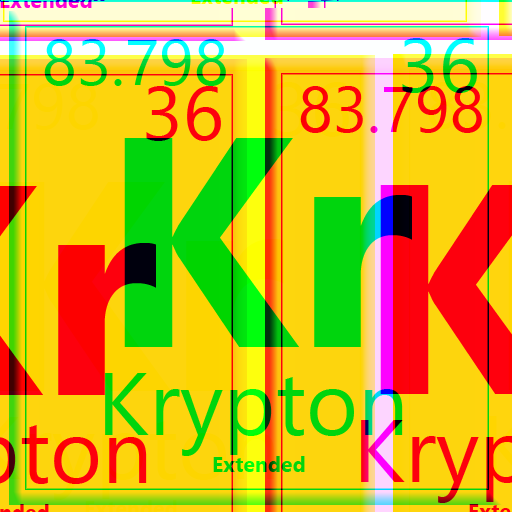
<style>
.page{position:relative;width:512px;height:512px;background:#fdd50d}
.page>*{position:absolute;margin:0}
.t1{font:64px "SegoeUI"}
.t2{font:76px "SegoeUI"}
.t3{font:298.7px "SegoeUI-Bold";color:#00d50d}
.t4{font:89.3px "SegoeUI"}
.t5{font:21.3px "SegoeUI-Bold"}
</style>
<div class="page">
<p class="t1" style="left:44px;top:37px;width:182px;height:47px">83.798</p>
<p class="t2" style="left:402px;top:36px;width:75px;height:55px">36</p>
<p class="t3" style="left:124px;top:136px;width:288px;height:209px">Kr</p>
<p class="t4" style="left:105px;top:371px;width:298px;height:83px">Krypton</p>
<p class="t5" style="left:213px;top:454px;width:92px;height:16px">Extended</p>
</div>
